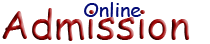
<style>
.page{position:relative;width:210px;height:44px;background:#ffffff}
.page>*{position:absolute;margin:0}
.t1{font:19.5px "ComicSansMS";color:#050d77}
.t2{font:38.6px "ComicSansMS";scale:1.05 1}
</style>
<div class="page">
<p class="t1" style="left:84px;top:2px;width:57px;height:15px">Online</p>
<p class="t2" style="left:2px;top:8px;width:188px;height:33px">Admission</p>
</div>
